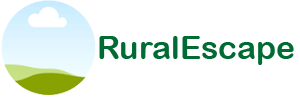
<style>
.page{position:relative;width:300px;height:100px;background:#ffffff}
.page>*{position:absolute;margin:0}
.t1{font:32px "ArialRoundedMTBold";color:#006b33}
</style>
<div class="page">
<p class="t1" style="left:99px;top:36px;width:195px;height:29px">RuralEscape</p>
</div>
